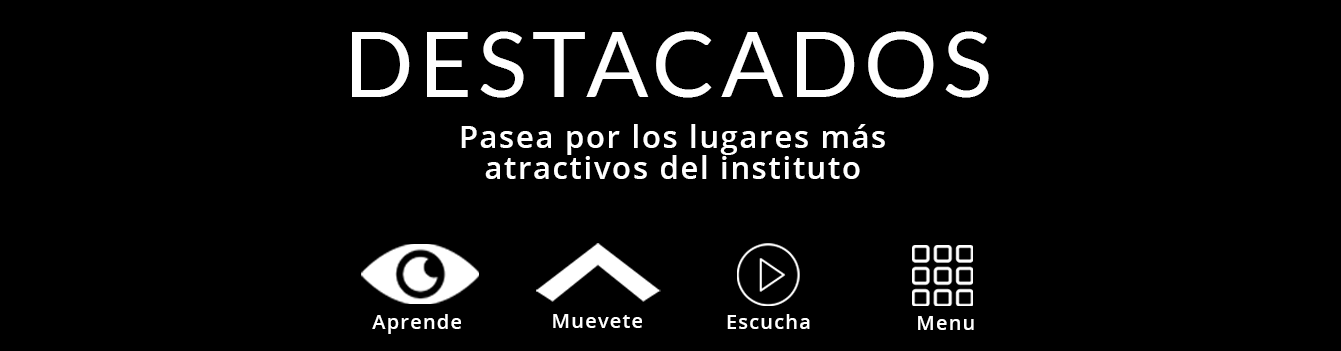
<style>
.page{position:relative;width:1341px;height:351px;background:#000000}
.page>*{position:absolute;margin:0}
.t1{font:92px "Lato-Regular";letter-spacing:0.06em;color:#ffffff}
.t2{font:30.7px/30.7px "OpenSans-Semibold";letter-spacing:0.06em;color:#ffffff}
.t3{font:20px "OpenSans-Semibold";letter-spacing:0.06em;color:#ffffff}
</style>
<div class="page">
<p class="t1" style="left:352px;top:31px;width:637px;height:67px">DESTACADOS</p>
<p class="t2" style="left:461px;top:124px;width:424px;height:55px;text-align:center">Pasea por los lugares más<br>atractivos del instituto</p>
<p class="t3" style="left:372px;top:314px;width:89px;height:20px">Aprende</p>
<p class="t3" style="left:553px;top:314px;width:89px;height:14px">Muevete</p>
<p class="t3" style="left:727px;top:314px;width:83px;height:15px">Escucha</p>
<p class="t3" style="left:918px;top:316px;width:56px;height:14px">Menu</p>
</div>
